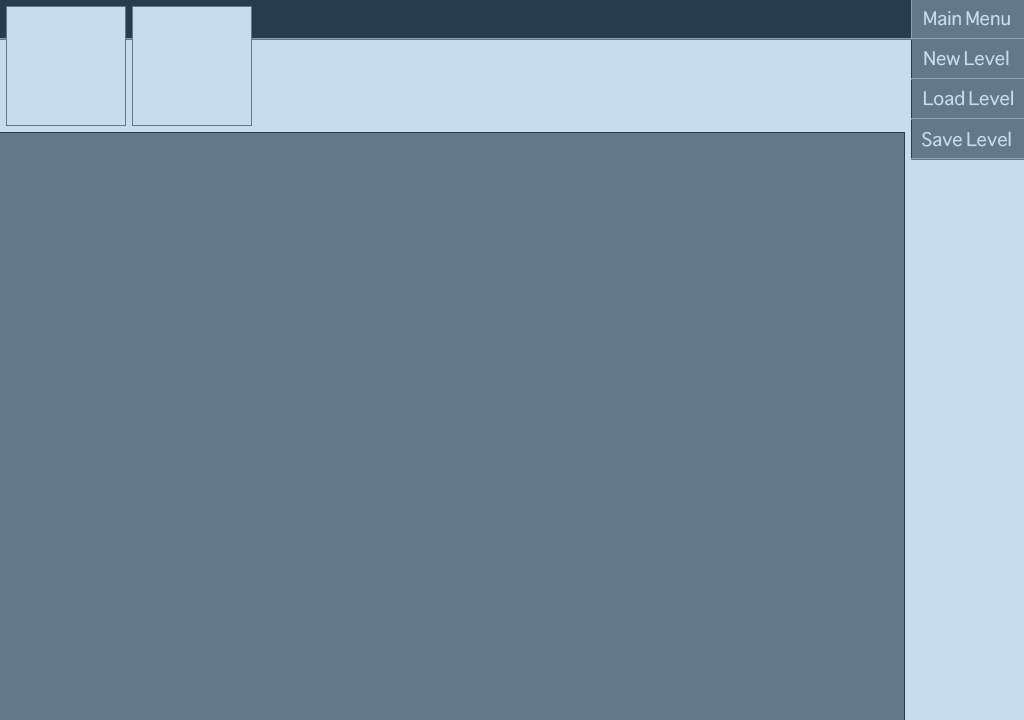
<style>
.page{position:relative;width:1024px;height:720px;background:#64788c}
.page>*{position:absolute;margin:0}
.t1{font:18px "Sathu";color:#c8dcf0}
</style>
<div class="page">
<p class="t1" style="left:924px;top:11px;width:86px;height:15px">Main Menu</p>
<p class="t1" style="left:924px;top:50px;width:85px;height:16px">New Level</p>
<p class="t1" style="left:923px;top:90px;width:91px;height:16px">Load Level</p>
<p class="t1" style="left:922px;top:131px;width:89px;height:16px">Save Level</p>
</div>
